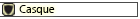
<style>
.page{position:relative;width:140px;height:19px;background:#ffffff}
.page>*{position:absolute;margin:0}
.t1{font:10.9px "LaoUI";color:#000000}
</style>
<div class="page">
<p class="t1" style="left:19px;top:5px;width:36px;height:10px">Casque</p>
</div>
